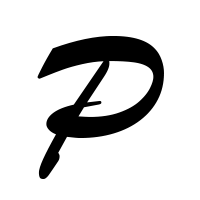
<style>
.page{position:relative;width:200px;height:200px;background:#ffffff}
.page>*{position:absolute;margin:0}
.t1{font:199.8px "BrushScriptMT";color:#000000}
</style>
<div class="page">
<p class="t1" style="left:37px;top:36px;width:127px;height:143px">P</p>
</div>
